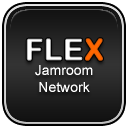
<style>
.page{position:relative;width:128px;height:128px}
.page>*{position:absolute;margin:0}
.t1{font:30px "ArialRoundedMTBold";font-weight:bold}
.t2{font:30px "ArialRoundedMTBold";color:#ff6600;font-weight:bold}
.t3{font:14px "ArialMT";color:#ffffff}
</style>
<div class="page">
<p class="t1" style="left:26px;top:38px;width:57px;height:23px">FLE</p>
<p class="t2" style="left:85px;top:38px;width:18px;height:23px">X</p>
<p class="t3" style="left:35px;top:65px;width:58px;height:27px;text-align:center">Jamroom<br>Network</p>
</div>
